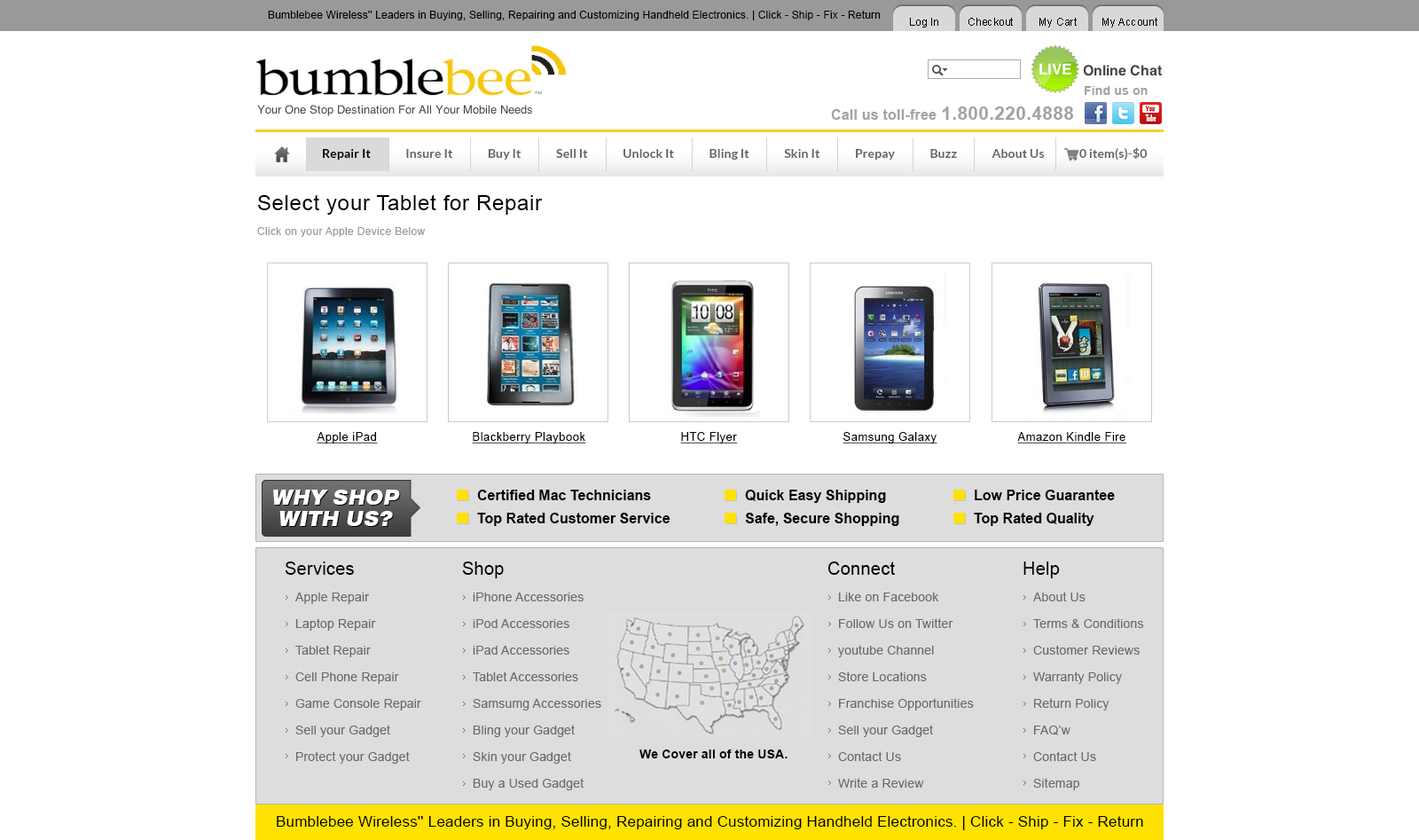
<style>
.page{position:relative;width:1419px;height:840px;background:#ffffff}
.page>*{position:absolute;margin:0}
.t1{font:10.6px "ArialMT";letter-spacing:0.013em;color:#000000}
.t2{font:12.4px "Arial-BoldMT";letter-spacing:0.013em;color:#a3a3a3}
.t3{font:14.2px "Arial-BoldMT";letter-spacing:0.013em;color:#a3a3a3}
.t4{font:18.6px "Arial-BoldMT";letter-spacing:0.013em;color:#a3a3a3}
.t5{font:12.4px "Lato-Bold";letter-spacing:0.008em;color:#666666}
.t6{font:12.4px "Lato-Bold";letter-spacing:0.008em;color:#000000}
.t7{font:21.3px "ArialMT";letter-spacing:0.028em;color:#000000}
.t8{font:10.6px "ArialMT";letter-spacing:0.028em;color:#999999}
.t9{font:11.5px "ArialMT";letter-spacing:0.038em;color:#000000;text-decoration:underline}
.t10{font:11.5px "ArialMT";letter-spacing:0.038em;color:#010101;text-decoration:underline}
.t11{font:21.3px/21.3px "Swiss721BT-Black";color:#ffffff;font-style:italic}
.t12{font:14.2px/23.1px "Arial-BoldMT";color:#000000}
.t13{font:17.7px "ArialMT";letter-spacing:0.013em;color:#000000}
.t14{font:12.4px/26.6px "ArialMT";letter-spacing:0.013em;color:#6b6b6b}
.t15{font:12.4px "Arial-BoldMT";letter-spacing:0.013em;color:#000000}
.t16{font:15.1px "ArialMT";letter-spacing:0.013em;color:#000000}
</style>
<div class="page">
<p class="t1" style="left:268px;top:11px;width:613px;height:9px">Bumblebee Wireless'' Leaders in Buying, Selling, Repairing and Customizing Handheld Electronics. | Click - Ship - Fix - Return</p>
<p class="t1" style="left:910px;top:18px;width:29px;height:10px">Log In</p>
<p class="t1" style="left:969px;top:18px;width:44px;height:8px">Checkout</p>
<p class="t1" style="left:1040px;top:18px;width:37px;height:10px">My Cart</p>
<p class="t1" style="left:1103px;top:18px;width:55px;height:10px">My Account</p>
<p class="t2" style="left:1085px;top:86px;width:63px;height:9px">Find us on</p>
<p class="t3" style="left:831px;top:106px;width:242px;height:14px">Call us toll-free <span class="t4">1.800.220.4888</span></p>
<p class="t5" style="left:323px;top:147px;width:825px;height:14px"><span class="t6">Repair It </span>             Insure It              Buy It              Sell It              Unlock It              Bling It              Skin It              Prepay              Buzz              About Us              0 item(s)-$0</p>
<p class="t7" style="left:258px;top:194px;width:285px;height:21px">Select your Tablet for Repair</p>
<p class="t8" style="left:257px;top:227px;width:169px;height:10px">Click on your Apple Device Below</p>
<p class="t9" style="left:317px;top:432px;width:61px;height:12px">Apple iPad</p>
<p class="t9" style="left:472px;top:432px;width:114px;height:12px">Blackberry Playbook</p>
<p class="t9" style="left:680px;top:432px;width:58px;height:12px">HTC Flyer</p>
<p class="t9" style="left:843px;top:432px;width:95px;height:12px">Samsung Galaxy</p>
<p class="t10" style="left:1018px;top:432px;width:109px;height:12px">Amazon Kindle Fire</p>
<p class="t11" style="left:273px;top:490px;width:127px;height:36px;text-align:center">WHY SHOP<br>WITH US?</p>
<p class="t12" style="left:477px;top:490px;width:194px;height:36px">Certified Mac Technicians   <br>Top Rated Customer Service</p>
<p class="t12" style="left:745px;top:490px;width:155px;height:36px">Quick Easy Shipping    <br>Safe, Secure Shopping</p>
<p class="t12" style="left:974px;top:490px;width:141px;height:36px">Low Price Guarantee    <br>Top Rated Quality</p>
<p class="t13" style="left:285px;top:562px;width:69px;height:13px">Services</p>
<p class="t13" style="left:462px;top:562px;width:42px;height:16px">Shop</p>
<p class="t13" style="left:828px;top:562px;width:67px;height:13px">Connect</p>
<p class="t13" style="left:1024px;top:562px;width:36px;height:16px">Help</p>
<p class="t14" style="left:295px;top:593px;width:126px;height:171px">Apple Repair<br>Laptop Repair<br>Tablet Repair<br>Cell Phone Repair<br>Game Console Repair<br>Sell your Gadget<br>Protect your Gadget</p>
<p class="t14" style="left:473px;top:593px;width:128px;height:197px">iPhone Accessories<br>iPod Accessories<br>iPad Accessories<br>Tablet Accessories<br>Samsumg Accessories<br>Bling your Gadget<br>Skin your Gadget<br>Buy a Used Gadget</p>
<p class="t14" style="left:837px;top:593px;width:137px;height:195px">Like on Facebook<br>Follow Us on Twitter<br>youtube Channel<br>Store Locations<br>Franchise Opportunities<br>Sell your Gadget<br>Contact Us<br>Write a Review</p>
<p class="t14" style="left:1033px;top:592px;width:111px;height:198px">About Us<br>Terms &amp; Conditions<br>Customer Reviews<br>Warranty Policy<br>Return Policy<br>FAQ’w<br>Contact Us<br>Sitemap</p>
<p class="t15" style="left:640px;top:750px;width:148px;height:8px">We Cover all of the USA.</p>
<p class="t16" style="left:277px;top:816px;width:866px;height:14px">Bumblebee Wireless'' Leaders in Buying, Selling, Repairing and Customizing Handheld Electronics. | Click - Ship - Fix - Return</p>
</div>
